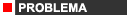
<style>
.page{position:relative;width:127px;height:15px;background:#333333}
.page>*{position:absolute;margin:0}
.t1{font:12px "Arial-BoldMT";color:#ffffff}
</style>
<div class="page">
<p class="t1" style="left:19px;top:3px;width:68px;height:10px">PROBLEMA</p>
</div>
